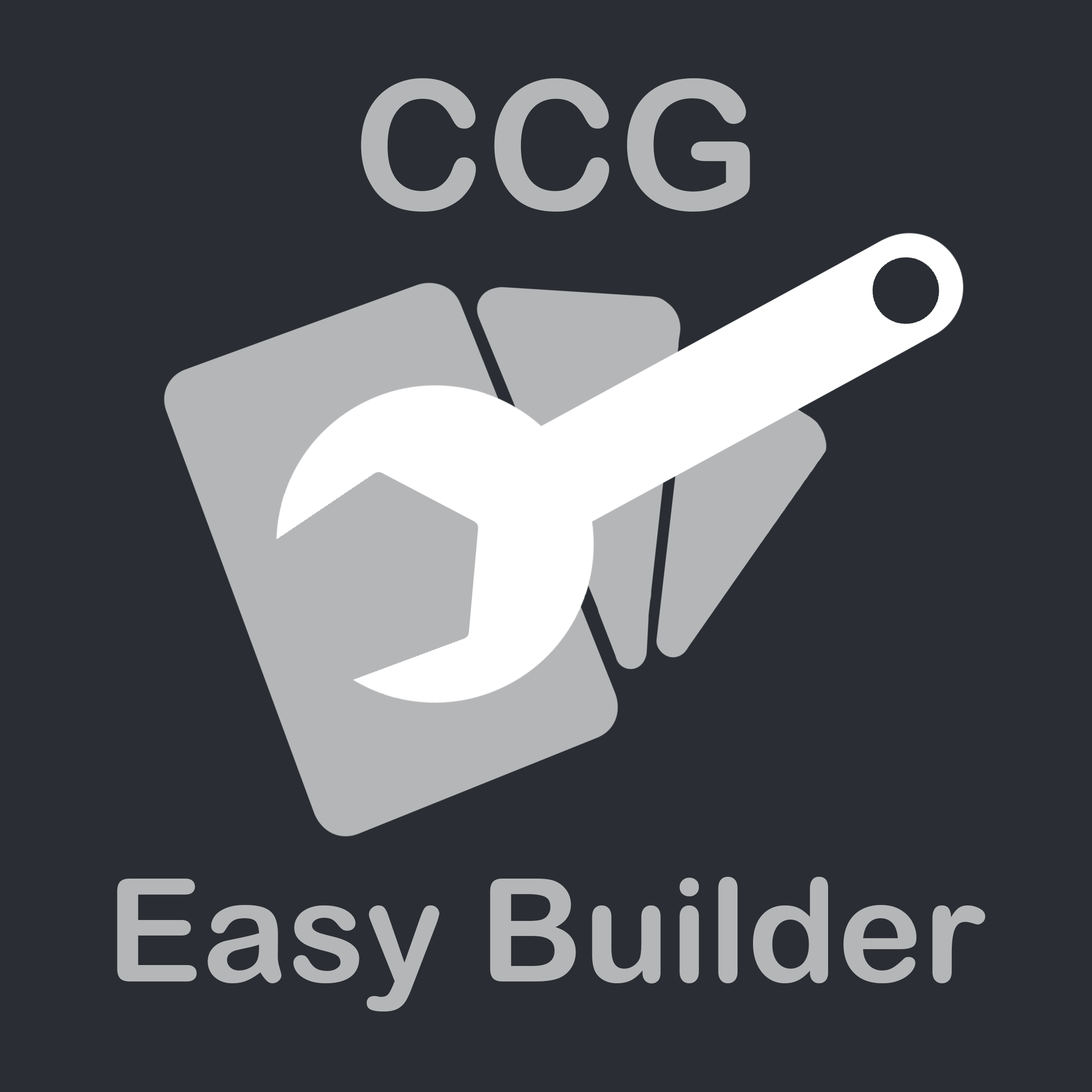
<style>
.page{position:relative;width:1092px;height:1092px;background:#2a2d33}
.page>*{position:absolute;margin:0}
.t1{font:179.7px "ArialRoundedMTBold";color:#b5b6b8}
.t2{font:143.8px "ArialRoundedMTBold";color:#b5b6b8}
</style>
<div class="page">
<p class="t1" style="left:361px;top:78px;width:389px;height:134px">CCG</p>
<p class="t2" style="left:117px;top:877px;width:869px;height:134px">Easy Builder</p>
</div>
